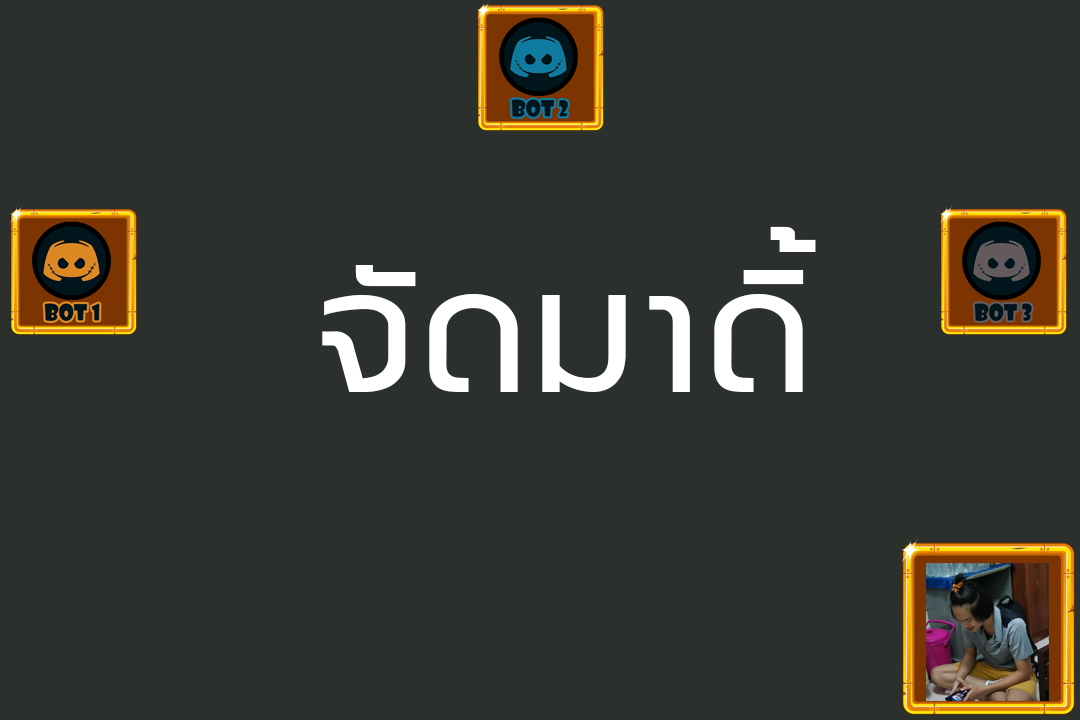
<style>
.page{position:relative;width:1080px;height:720px;background:#2b302d}
.page>*{position:absolute;margin:0}
.t1{font:250px "SB-Modern";color:#ffffff}
</style>
<div class="page">
<p class="t1" style="left:322px;top:226px;width:494px;height:166px">จัดมาดิ้</p>
</div>
